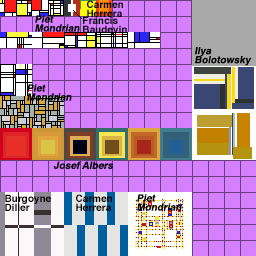
<style>
.page{position:relative;width:256px;height:256px;background:#d67fff}
.page>*{position:absolute;margin:0}
.t1{font:10px/9px "Helvetica-Bold";color:#000000}
.t2{font:10px/9px "Helvetica-Bold";color:#000000;font-style:italic}
.t3{font:10px "Helvetica-Bold";color:#000000;font-style:italic}
</style>
<div class="page">
<p class="t1" style="left:87px;top:0px;width:36px;height:17px">Carmen<br>Herrera</p>
<p class="t2" style="left:35px;top:15px;width:45px;height:17px">Piet<br>Mondrian</p>
<p class="t1" style="left:83px;top:16px;width:44px;height:17px">Francis<br>Baudevin</p>
<p class="t2" style="left:194px;top:47px;width:58px;height:19px">Ilya<br>Bolotowsky</p>
<p class="t2" style="left:27px;top:84px;width:45px;height:17px">Piet<br>Mondrian</p>
<p class="t3" style="left:53px;top:161px;width:61px;height:9px">Josef Albers</p>
<p class="t1" style="left:5px;top:194px;width:46px;height:17px">Burgoyne<br>Diller</p>
<p class="t1" style="left:76px;top:194px;width:36px;height:17px">Carmen<br>Herrera</p>
<p class="t2" style="left:137px;top:194px;width:45px;height:17px">Piet<br>Mondrian</p>
</div>
